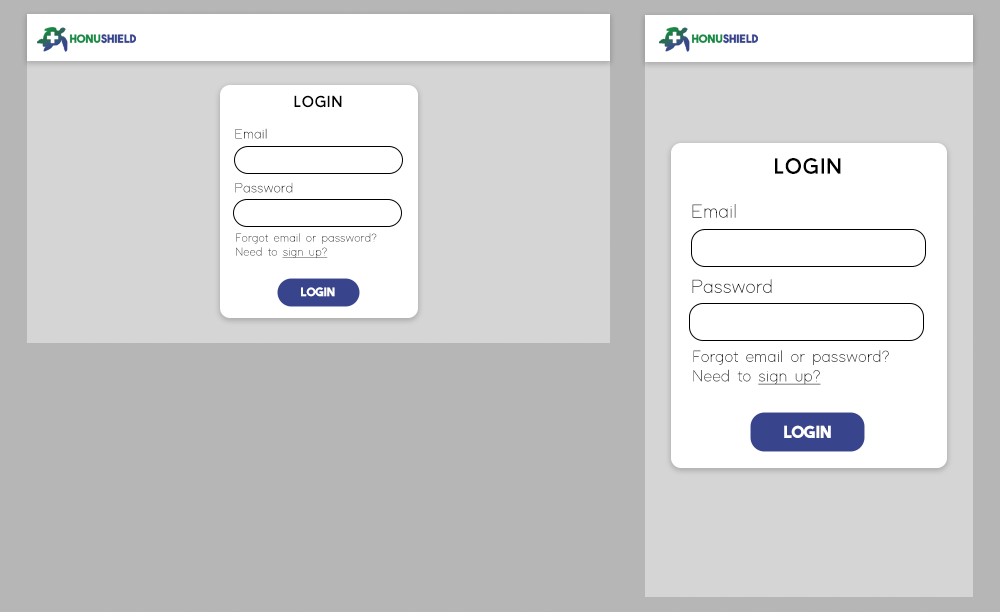
<style>
.page{position:relative;width:1000px;height:612px;background:#d5d5d5}
.page>*{position:absolute;margin:0}
.t1{font:16px "BaronNeue";color:#000000}
.t2{font:14px/18px "ModernSansLight"}
.t3{font:22.3px "BaronNeue";color:#000000}
.t4{font:19.5px/25.1px "ModernSansLight";color:#000000}
.t5{font:12px/14px "ModernSansLight"}
.t6{font:12px/14px "ModernSansLight";text-decoration:underline}
.t7{font:12px "TheBoldFont";color:#ffffff}
.t8{font:16.7px/19.5px "ModernSansLight";color:#000000}
.t9{font:16.7px/19.5px "ModernSansLight";color:#000000;text-decoration:underline}
.t10{font:16.7px "TheBoldFont";color:#ffffff}
</style>
<div class="page">
<p class="t1" style="left:294px;top:95px;width:48px;height:13px">Login</p>
<p class="t2" style="left:235px;top:128px;width:58px;height:65px">Email<br><br><br>Password</p>
<p class="t3" style="left:775px;top:158px;width:66px;height:16px">Login</p>
<p class="t4" style="left:692px;top:204px;width:80px;height:89px">Email<br><br><br>Password</p>
<p class="t5" style="left:236px;top:233px;width:141px;height:25px">Forgot email or password?<br>Need to <span class="t6">sign up?</span></p>
<p class="t7" style="left:301px;top:287px;width:34px;height:10px">LOGIN</p>
<p class="t8" style="left:693px;top:350px;width:196px;height:35px">Forgot email or password?<br>Need to <span class="t9">sign up?</span></p>
<p class="t10" style="left:784px;top:425px;width:47px;height:13px">LOGIN</p>
</div>
